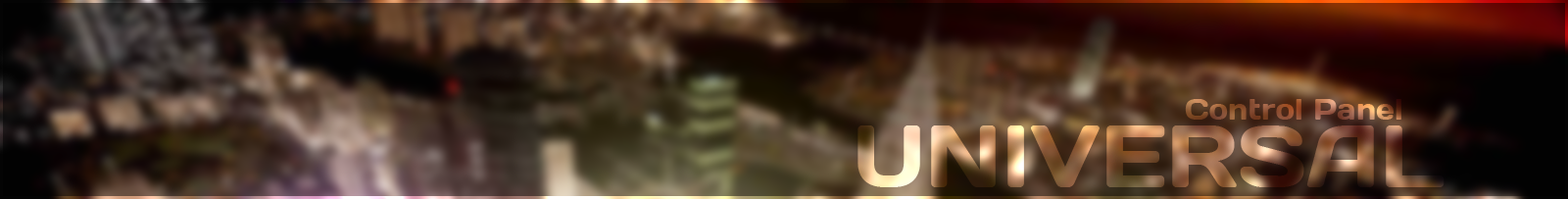
<style>
.page{position:relative;width:1568px;height:199px}
.page>*{position:absolute;margin:0}
.t1{font:29.4px "Days"}
.t2{font:88.2px "Days"}
</style>
<div class="page">
<p class="t1" style="left:1185px;top:99px;width:216px;height:21px">Control Panel</p>
<p class="t2" style="left:858px;top:125px;width:587px;height:62px">UNIVERSAL</p>
</div>
